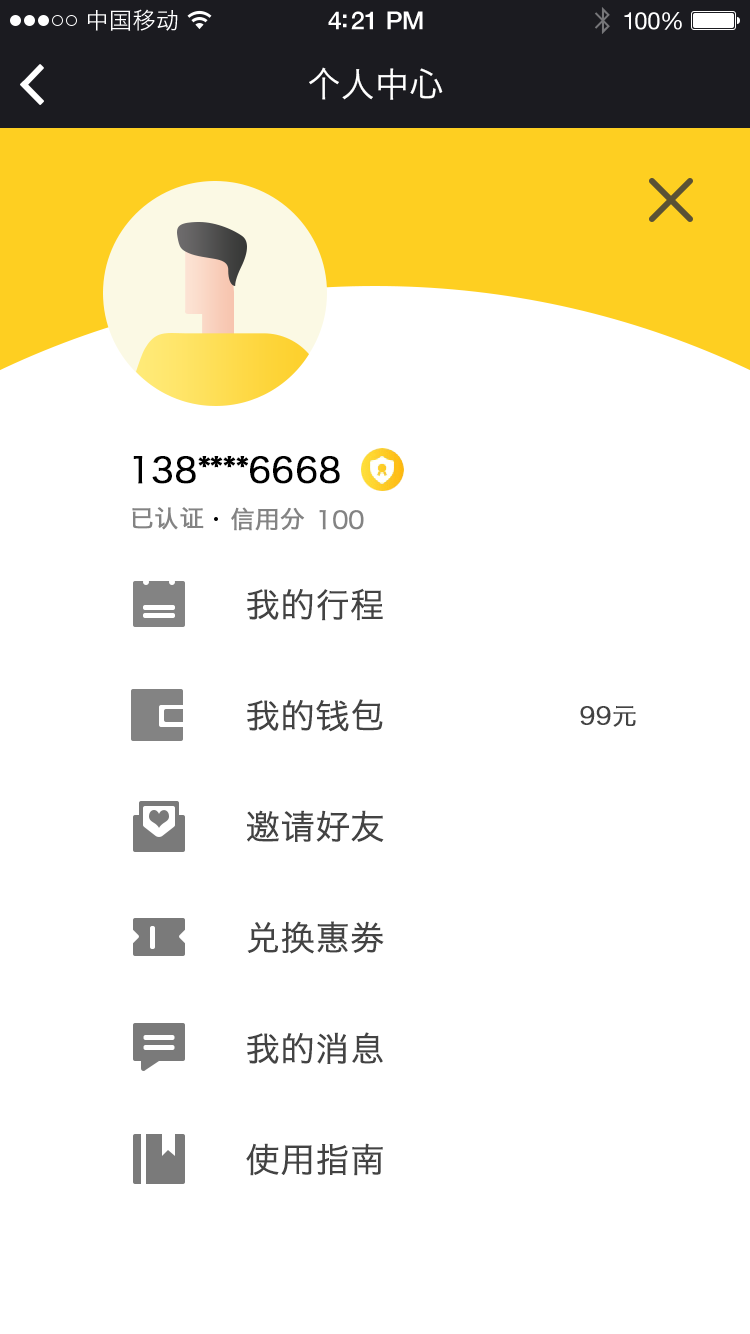
<style>
.page{position:relative;width:750px;height:1334px;background:#ffffff}
.page>*{position:absolute;margin:0}
.t1{font:23px "HiraginoSansGB-W3";letter-spacing:0.02em;color:#ffffff}
.t2{font:25px "HelveticaNeue-Medium";letter-spacing:-0.02em;color:#ffffff}
.t3{font:24px "HelveticaNeue";letter-spacing:-0.02em;color:#ffffff}
.t4{font:34px "HiraginoSansGB-W3";color:#ffffff}
.t5{font:34px "HiraginoSansGB-W3";color:#000000;font-weight:bold}
.t6{font:24px "HiraginoSansGB-W3";color:#838383;font-weight:bold}
.t7{font:34px/111px "HiraginoSansGB-W3";color:#434343;font-weight:bold}
.t8{font:24px "HiraginoSansGB-W3";color:#434343;font-weight:bold}
</style>
<div class="page">
<p class="t1" style="left:87px;top:9px;width:91px;height:22px">中国移动</p>
<p class="t2" style="left:328px;top:11px;width:95px;height:19px">4:21 PM</p>
<p class="t3" style="left:624px;top:12px;width:58px;height:18px">100%</p>
<p class="t4" style="left:309px;top:67px;width:134px;height:33px">个人中心</p>
<p class="t5" style="left:133px;top:456px;width:207px;height:28px">138****6668</p>
<p class="t6" style="left:132px;top:507px;width:72px;height:23px">已认证</p>
<p class="t6" style="left:231px;top:507px;width:74px;height:24px">信用分</p>
<p class="t6" style="left:319px;top:510px;width:45px;height:20px">100</p>
<p class="t7" style="left:246px;top:588px;width:138px;height:588px;text-align:center">我的行程<br>我的钱包<br>邀请好友<br>兑换惠劵<br>我的消息<br>使用指南</p>
<p class="t8" style="left:580px;top:706px;width:56px;height:21px">99元</p>
</div>
